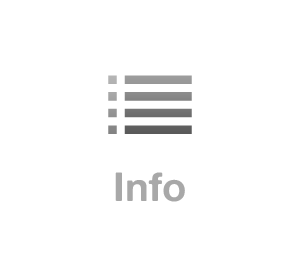
<style>
.page{position:relative;width:300px;height:260px;background:#ffffff}
.page>*{position:absolute;margin:0}
.t1{font:40px "AlteHaasGrotesk_Bold";color:#a8a8a8}
</style>
<div class="page">
<p class="t1" style="left:115px;top:172px;width:70px;height:30px">Info</p>
</div>
